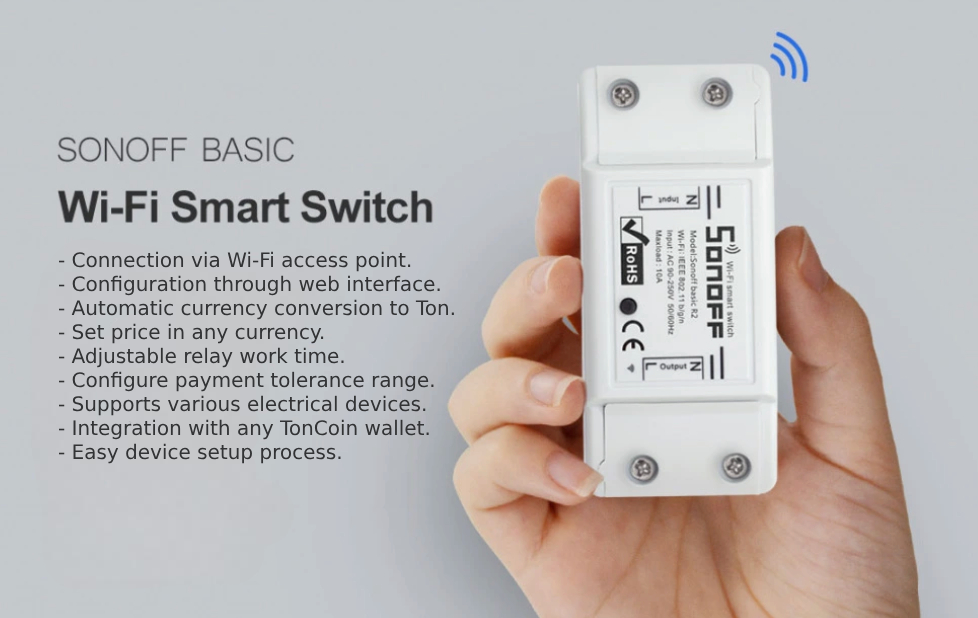
<style>
.page{position:relative;width:978px;height:618px;background:#c4c9cc}
.page>*{position:absolute;margin:0}
.t1{font:20px "DejaVuSans";color:#323335}
</style>
<div class="page">
<p class="t1" style="left:58px;top:251px;width:396px;height:213px">- Connection via Wi-Fi access point.  <br>- Configuration through web interface.  <br>- Automatic currency conversion to Ton.  <br>- Set price in any currency.  <br>- Adjustable relay work time.  <br>- Configure payment tolerance range.  <br>- Supports various electrical devices.  <br>- Integration with any TonCoin wallet.  <br>- Easy device setup process.</p>
</div>
